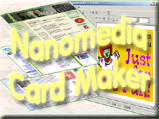
<style>
.page{position:relative;width:159px;height:119px}
.page>*{position:absolute;margin:0}
.t1{font:36px "VNI-Vari";color:#fffe81;scale:0.73 1}
</style>
<div class="page">
<p class="t1" style="left:9px;top:15px;width:141px;height:90px;text-align:center">Nanomedia<br>Card Maker</p>
</div>
